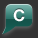
<style>
.page{position:relative;width:38px;height:38px;background:#333333}
.page>*{position:absolute;margin:0}
.t1{font:15.9px "HelveticaNeue-Bold";color:#ffffff}
</style>
<div class="page">
<p class="t1" style="left:13px;top:9px;width:12px;height:13px">C</p>
</div>
